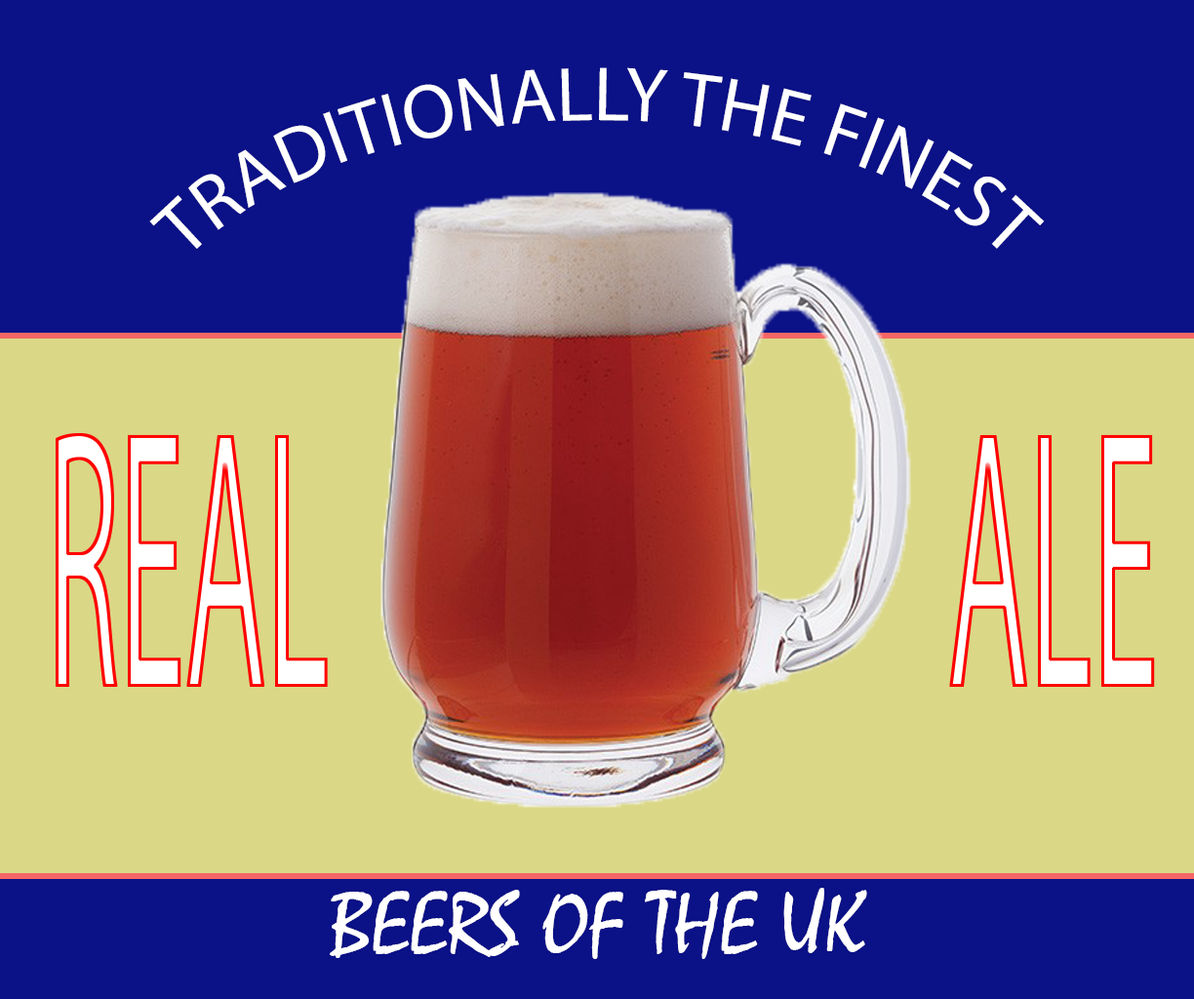
<style>
.page{position:relative;width:1194px;height:999px;background:#0b1186}
.page>*{position:absolute;margin:0}
.t1{font:77.2px "MyriadPro-Regular";color:#ffffff}
.t2{font:89.4px "Mistral";color:#ffffff}
</style>
<div class="page">
<p class="t1" style="left:149px;top:67px;width:896px;height:182px;text-align:center">TRADITIONALLY THE FINEST</p>
<p class="t2" style="left:330px;top:888px;width:537px;height:71px">BEERS OF THE UK</p>
</div>
